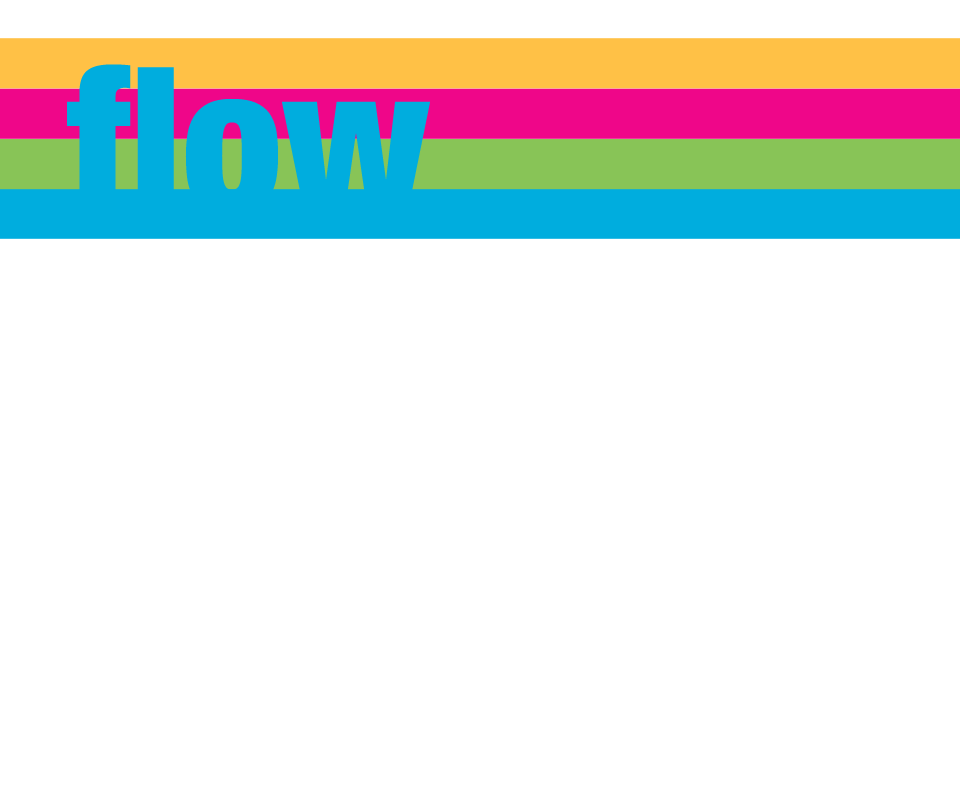
<style>
.page{position:relative;width:960px;height:800px;background:#ffffff}
.page>*{position:absolute;margin:0}
.t1{font:200px "HelveticaNeue-CondensedBlack";color:#00adde}
</style>
<div class="page">
<p class="t1" style="left:67px;top:64px;width:363px;height:149px">flow</p>
</div>
